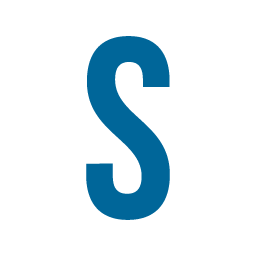
<style>
.page{position:relative;width:256px;height:256px;background:#ffffff}
.page>*{position:absolute;margin:0}
.t1{font:256.4px "BebasNeue";color:#006699}
</style>
<div class="page">
<p class="t1" style="left:86px;top:36px;width:84px;height:184px">S</p>
</div>
